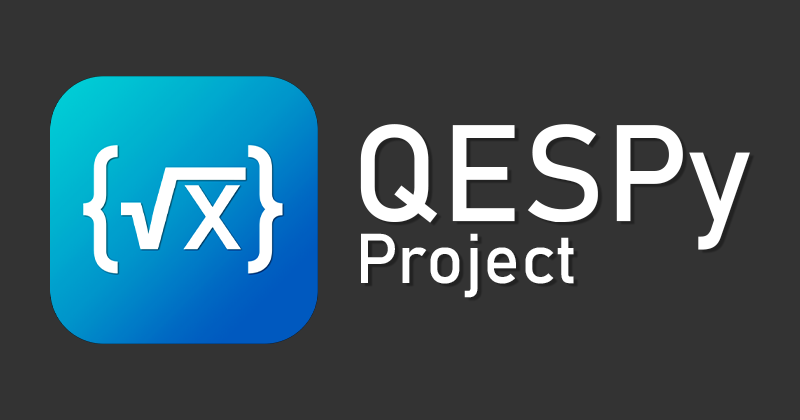
<style>
.page{position:relative;width:800px;height:420px;background:#333333}
.page>*{position:absolute;margin:0}
.t1{font:135.2px "Bahnschrift";letter-spacing:0.005em;color:#ffffff}
.t2{font:69.3px "Bahnschrift";letter-spacing:0.005em;color:#ffffff}
</style>
<div class="page">
<p class="t1" style="left:360px;top:124px;width:390px;height:126px">QESPy</p>
<p class="t2" style="left:361px;top:233px;width:213px;height:65px">Project</p>
</div>
